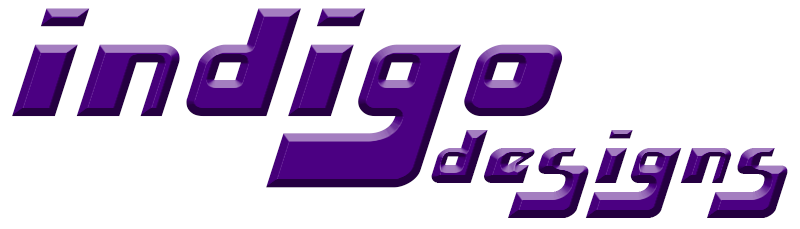
<style>
.page{position:relative;width:800px;height:229px;background:#ffffff}
.page>*{position:absolute;margin:0}
.t1{font:95.4px/66.8px "HuskyStash-Regular"}
.t2{font:194.7px "HuskyStash-Regular"}
</style>
<div class="page">
<p class="t1" style="left:12px;top:8px;width:776px;height:210px;text-align:right"><span class="t2">indigo<br></span>designs</p>
</div>
